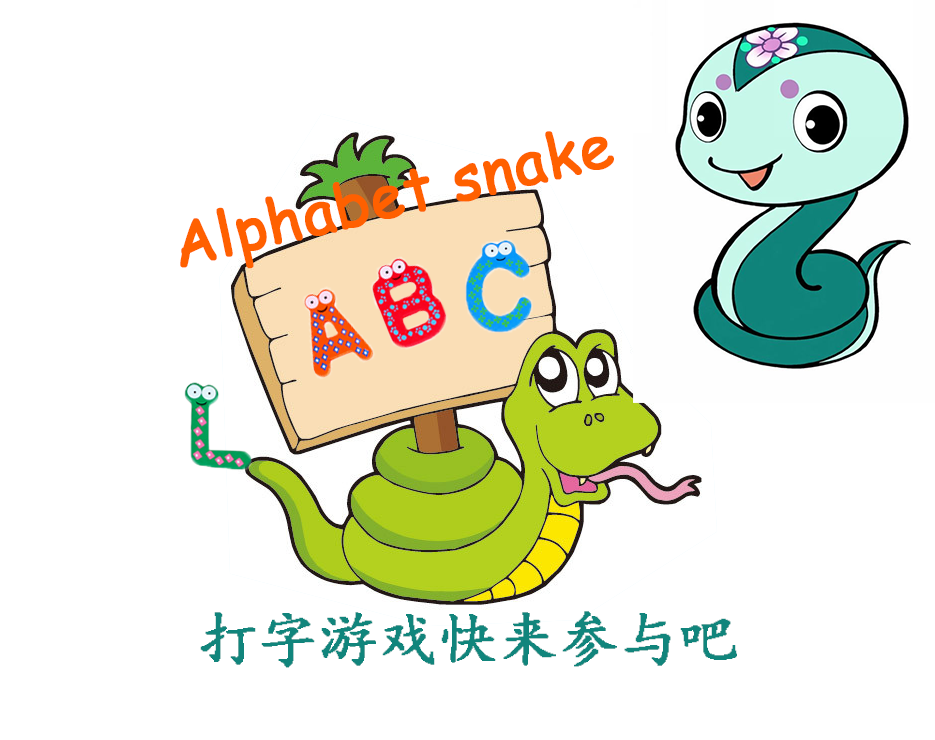
<style>
.page{position:relative;width:935px;height:740px;background:#ffffff}
.page>*{position:absolute;margin:0}
.t1{font:60px "ComicSansMS";color:#ff6000;font-weight:bold}
.t2{font:60px "¿¬Ìå";color:#11857c;font-weight:bold}
</style>
<div class="page">
<p class="t1" style="left:180px;top:131px;width:434px;height:138px;rotate:-13deg">Alphabet snake</p>
<p class="t2" style="left:200px;top:611px;width:537px;height:57px">打字游戏快来参与吧</p>
</div>
